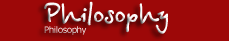
<style>
.page{position:relative;width:229px;height:41px;background:#9d0808}
.page>*{position:absolute;margin:0}
.t1{font:30px "BetinaScriptBold"}
.t2{font:9px "Tahoma"}
</style>
<div class="page">
<p class="t1" style="left:44px;top:1px;width:124px;height:34px">Philosophy<br><span class="t2">Philosophy</span></p>
</div>
